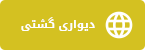
<style>
.page{position:relative;width:145px;height:50px;background:#d4c121}
.page>*{position:absolute;margin:0}
.t1{font:11px "DroidArabicKufi-Bold";color:#ffffff}
</style>
<div class="page">
<p class="t1" style="left:21px;top:17px;width:74px;height:14px">دیواری گشتی</p>
</div>
